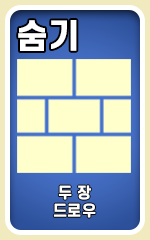
<style>
.page{position:relative;width:150px;height:240px;background:#ffffcc}
.page>*{position:absolute;margin:0}
.t1{font:32.7px "S-CoreDream-6Bold";color:#ffffff;font-weight:bold}
.t2{font:14.6px/17.9px "S-CoreDream-6Bold";color:#ffffff;font-weight:bold}
</style>
<div class="page">
<p class="t1" style="left:18px;top:20px;width:59px;height:31px">숨기</p>
<p class="t2" style="left:53px;top:185px;width:43px;height:33px;text-align:center">두 장<br>드로우</p>
</div>
